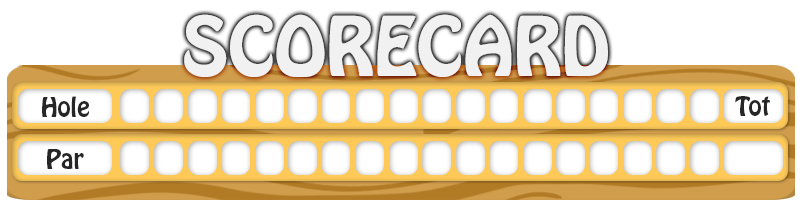
<style>
.page{position:relative;width:803px;height:222px;background:#ffffff}
.page>*{position:absolute;margin:0}
.t1{font:72px "HoboStd";color:#f2f2f2}
.t2{font:24px "HoboStd";color:#262626}
</style>
<div class="page">
<p class="t1" style="left:184px;top:14px;width:424px;height:63px">SCORECARD</p>
<p class="t2" style="left:42px;top:96px;width:47px;height:21px">Hole</p>
<p class="t2" style="left:735px;top:96px;width:35px;height:20px">Tot</p>
<p class="t2" style="left:47px;top:149px;width:37px;height:20px">Par</p>
</div>
